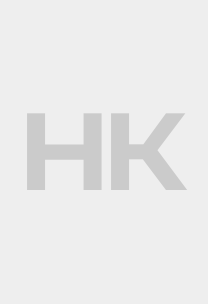
<style>
.page{position:relative;width:208px;height:304px;background:#eeeeee}
.page>*{position:absolute;margin:0}
.t1{font:143.5px "Montserrat-SemiBold";letter-spacing:-0.1em;color:#cbcbcb}
</style>
<div class="page">
<p class="t1" style="left:27px;top:113px;width:161px;height:77px">нк</p>
</div>
